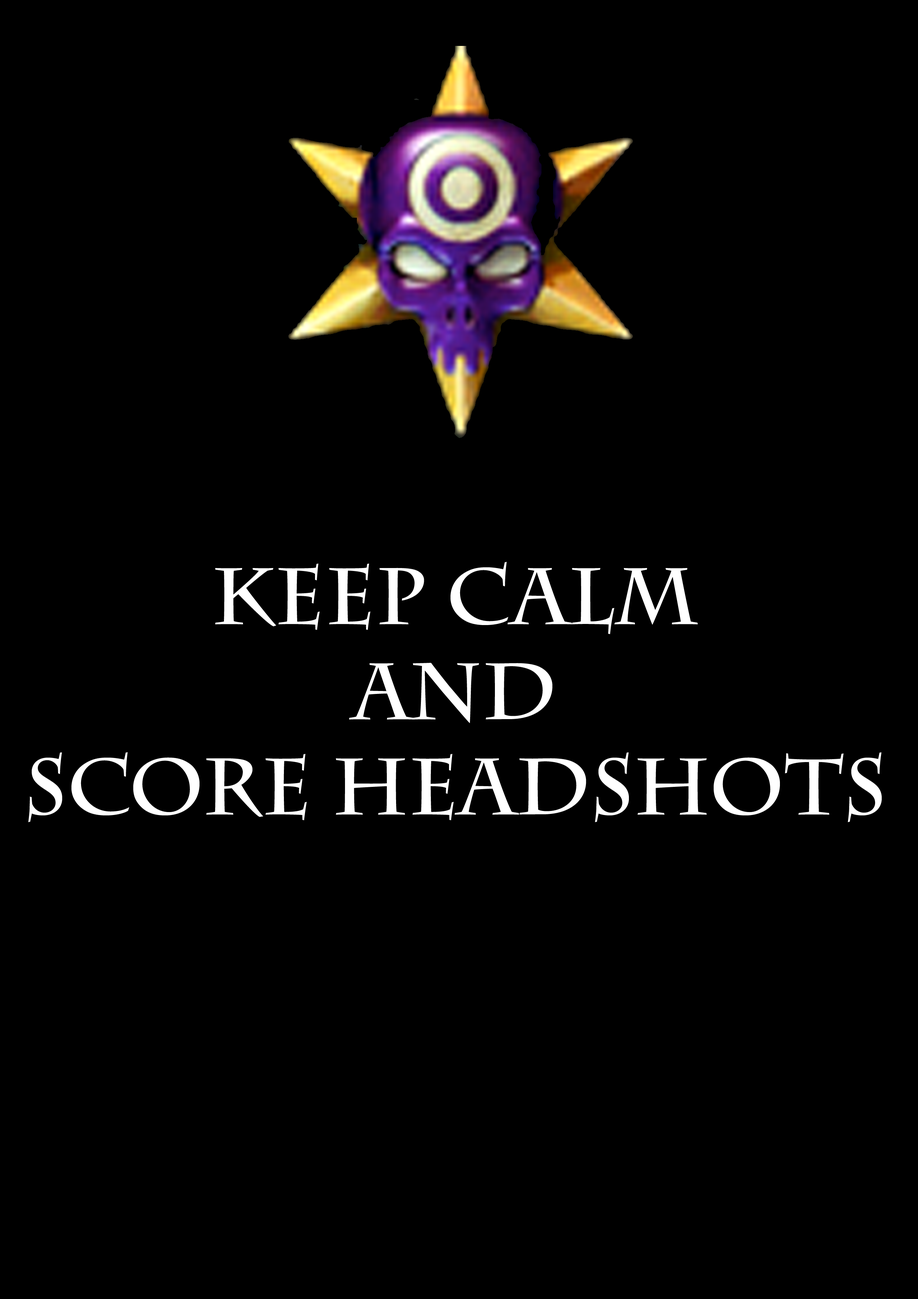
<style>
.page{position:relative;width:918px;height:1299px;background:#000000}
.page>*{position:absolute;margin:0}
.t1{font:79.2px "CharlemagneStd-Bold";color:#ffffff}
</style>
<div class="page">
<p class="t1" style="left:28px;top:562px;width:854px;height:260px;text-align:center">Keep calm<br>and<br>score headshots</p>
</div>
